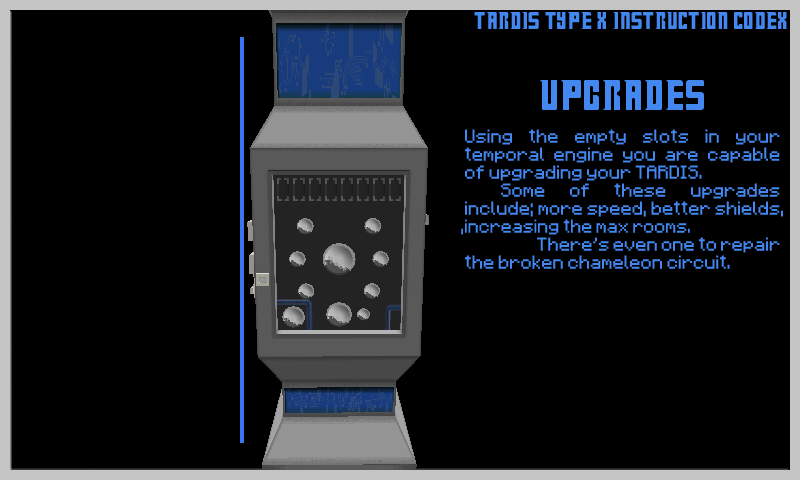
<style>
.page{position:relative;width:800px;height:480px;background:#000000}
.page>*{position:absolute;margin:0}
.t1{font:27px "Doctor-Who";color:#4388f1}
.t2{font:15px "Minecraftia-Regular";color:#4388f1}
.t3{font:48px "Doctor-Who";color:#4388f1}
</style>
<div class="page">
<p class="t1" style="left:474px;top:12px;width:313px;height:17px">TARDIS Type X Instruction Codex</p>
<p class="t2" style="left:461px;top:80px;width:322px;height:189px;text-align:center"><span class="t3">UpGrades<br> <br></span>Using the empty slots in your temporal engine you are capable of upgrading your TARDIS.<br> Some of these upgrades include; more speed, better shields, ,increasing the max rooms.      There’s even one to repair the broken chameleon circuit.</p>
</div>
